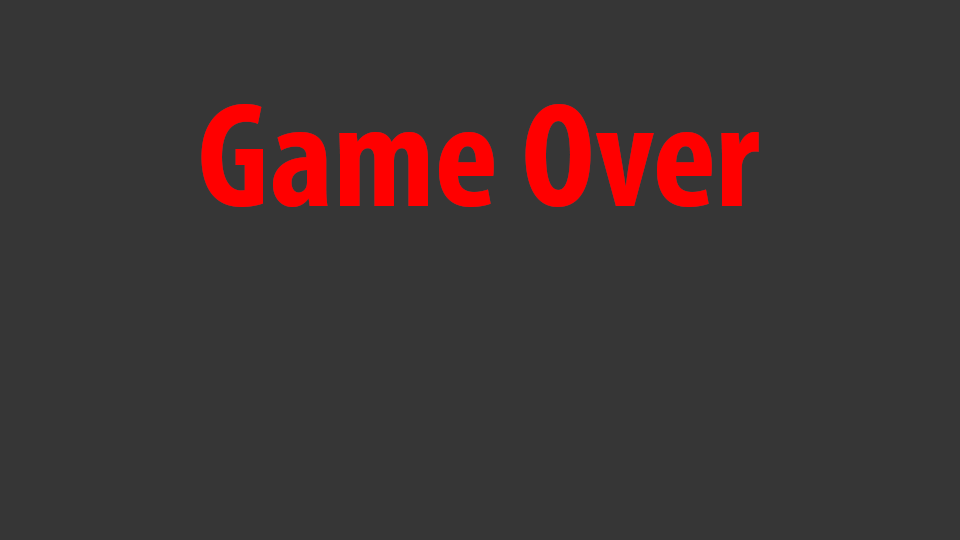
<style>
.page{position:relative;width:960px;height:540px;background:#363636}
.page>*{position:absolute;margin:0}
.t1{font:150px "MyriadPro-BoldCond";color:#ff0000}
</style>
<div class="page">
<p class="t1" style="left:201px;top:103px;width:558px;height:104px">Game Over</p>
</div>
